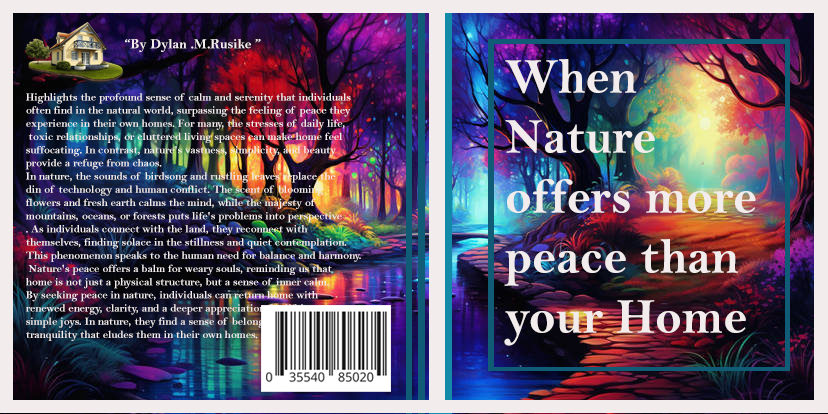
<style>
.page{position:relative;width:828px;height:414px}
.page>*{position:absolute;margin:0}
.t1{font:14px "BellMTBold";color:#f2ecec}
.t2{font:50px "BellMTBold";color:#f2ecec}
.t3{font:11px "BellMTBold";color:#f2ecec}
</style>
<div class="page">
<p class="t1" style="left:125px;top:39px;width:136px;height:13px">“By Dylan .M.Rusike ”</p>
<p class="t2" style="left:504px;top:59px;width:252px;height:287px">When Nature offers more peace than your Home</p>
<p class="t3" style="left:25px;top:93px;width:336px;height:248px">Highlights the profound sense of calm and serenity that individuals <br>often find in the natural world, surpassing the feeling of peace they <br>experience in their own homes. For many, the stresses of daily life,<br> toxic relationships, or cluttered living spaces can make home feel <br>suffocating. In contrast, nature's vastness, simplicity, and beauty <br>provide a refuge from chaos.<br>In nature, the sounds of birdsong and rustling leaves replace the <br>din of technology and human conflict. The scent of blooming <br>flowers and fresh earth calms the mind, while the majesty of <br>mountains, oceans, or forests puts life's problems into perspective<br>. As individuals connect with the land, they reconnect with <br>themselves, finding solace in the stillness and quiet contemplation.<br>This phenomenon speaks to the human need for balance and harmony.<br> Nature's peace offers a balm for weary souls, reminding us that <br>home is not just a physical structure, but a sense of inner calm. <br>By seeking peace in nature, individuals can return home with <br>renewed energy, clarity, and a deeper appreciation for life's <br>simple joys. In nature, they find a sense of belonging and <br>tranquility that eludes them in their own homes.</p>
</div>
